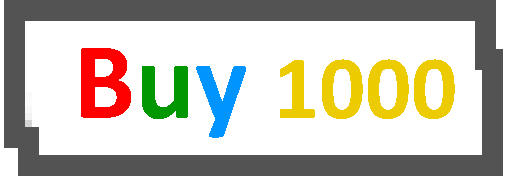
<style>
.page{position:relative;width:512px;height:176px;background:#ffffff}
.page>*{position:absolute;margin:0}
.t1{font:90.7px "Calibri-Bold";color:#eccc00}
.t2{font:110.7px "Calibri-Bold";color:#ff0000}
.t3{font:110.7px "Calibri-Bold";color:#009700}
.t4{font:110.7px "Calibri-Bold";color:#0094ff}
</style>
<div class="page">
<p class="t1" style="left:81px;top:48px;width:374px;height:90px"><span class="t2">B</span><span class="t3">u</span><span class="t4">y </span>1000</p>
</div>
